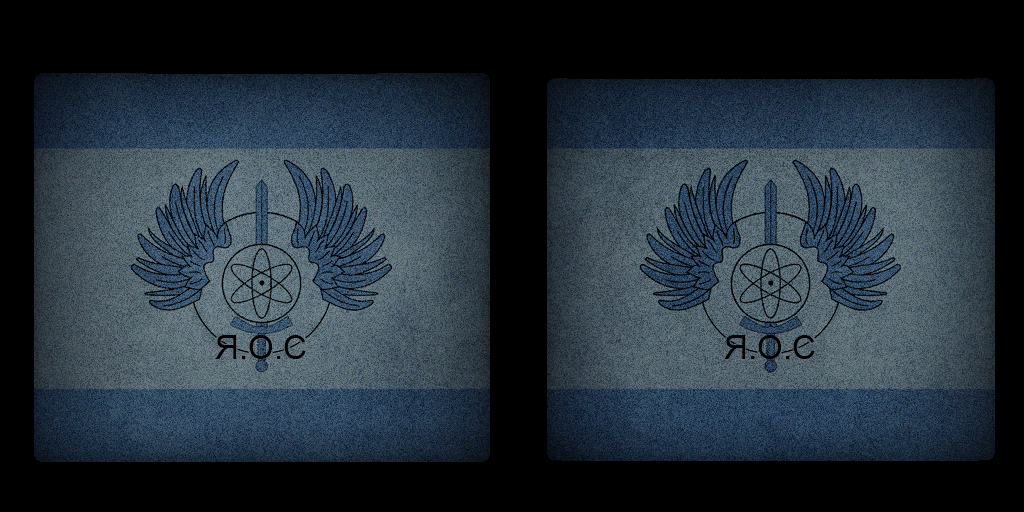
<style>
.page{position:relative;width:1024px;height:512px;background:#000000}
.page>*{position:absolute;margin:0}
.t1{font:33px "ArialMT";color:#000000}
</style>
<div class="page">
<p class="t1" style="left:215px;top:335px;width:91px;height:24px">Я.О.С</p>
<p class="t1" style="left:724px;top:335px;width:91px;height:24px">Я.О.С</p>
</div>
